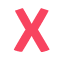
<style>
.page{position:relative;width:64px;height:60px;background:#ffffff}
.page>*{position:absolute;margin:0}
.t1{font:61.2px "MikadoMedium";color:#f84460}
</style>
<div class="page">
<p class="t1" style="left:13px;top:8px;width:37px;height:44px">X</p>
</div>
